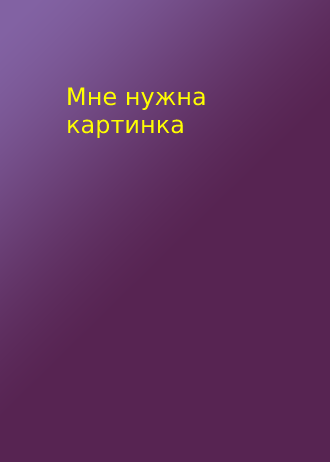
<style>
.page{position:relative;width:330px;height:462px;background:#572452}
.page>*{position:absolute;margin:0}
.t1{font:24px "DejaVuSans";color:#ffff00}
</style>
<div class="page">
<p class="t1" style="left:68px;top:87px;width:137px;height:51px">Мне нужна<br>картинка</p>
</div>
